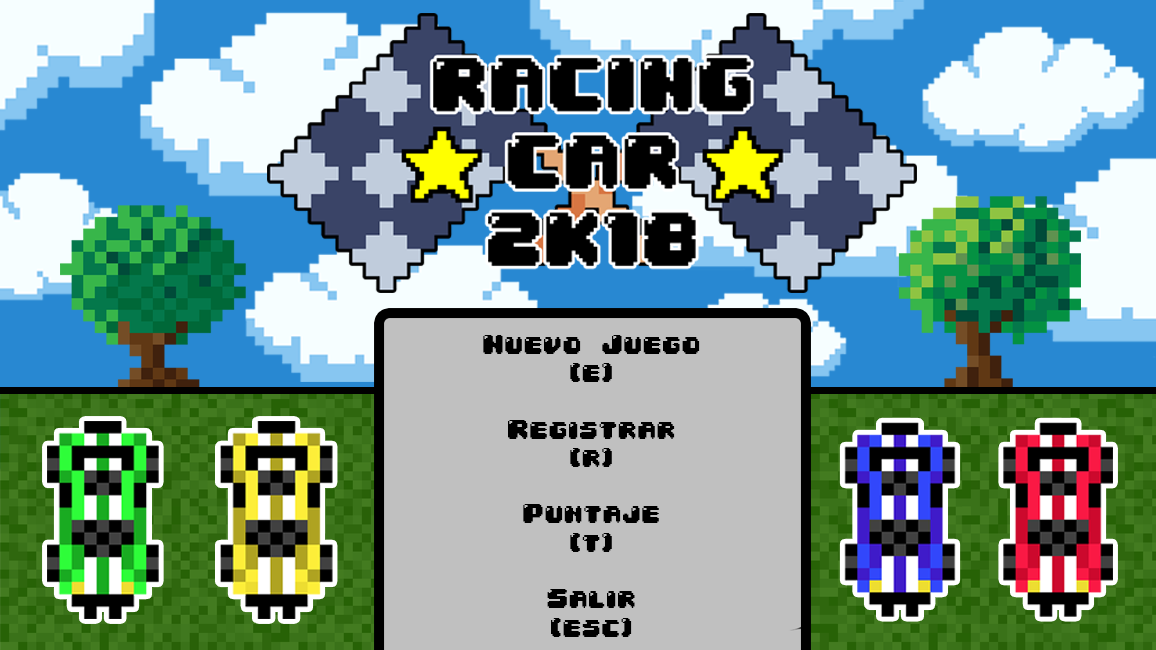
<style>
.page{position:relative;width:1156px;height:650px}
.page>*{position:absolute;margin:0}
.t1{font:23.6px "04b30";color:#000000}
</style>
<div class="page">
<p class="t1" style="left:483px;top:335px;width:217px;height:302px;text-align:center">Nuevo Juego<br>[e]<br><br>Registrar<br>[r]<br><br>Puntaje<br>[t]<br><br>Salir<br>[esc]</p>
</div>
